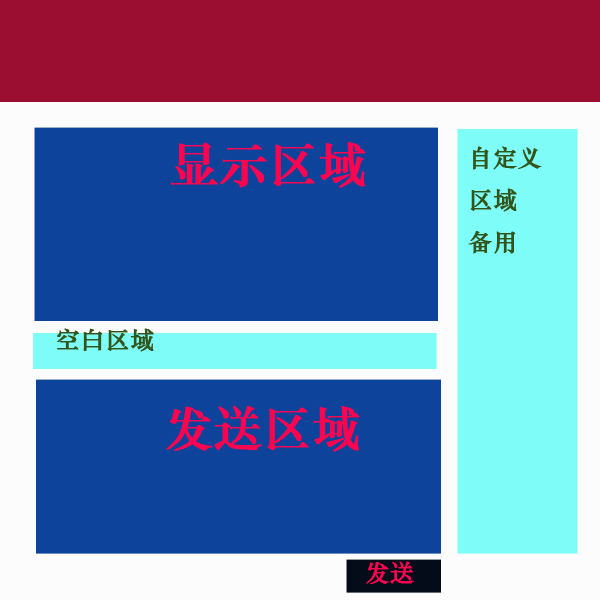
<style>
.page{position:relative;width:600px;height:600px;background:#0e439b}
.page>*{position:absolute;margin:0}
.t1{font:48px "STZhongsong";color:#fe0350;font-weight:bold}
.t2{font:24px "STZhongsong";color:#32551b;font-weight:bold}
.t3{font:24px "STZhongsong";color:#fe0350;font-weight:bold}
</style>
<div class="page">
<p class="t1" style="left:170px;top:142px;width:196px;height:46px">显示区域</p>
<p class="t2" style="left:468px;top:146px;width:74px;height:108px">自定义<br>区域<br>备用</p>
<p class="t2" style="left:57px;top:328px;width:97px;height:24px">空白区域</p>
<p class="t1" style="left:166px;top:406px;width:194px;height:46px">发送区域</p>
<p class="t3" style="left:366px;top:561px;width:48px;height:23px">发送</p>
</div>
